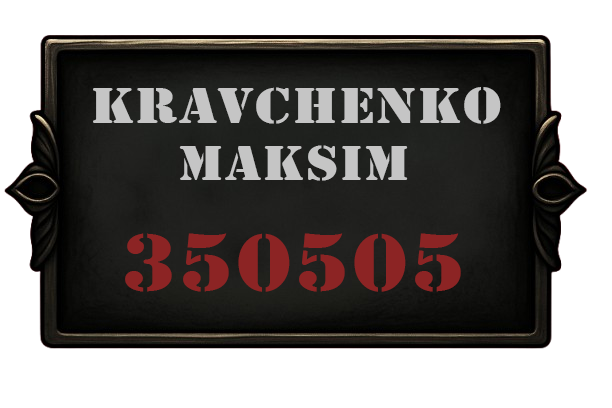
<style>
.page{position:relative;width:612px;height:408px;background:#ffffff}
.page>*{position:absolute;margin:0}
.t1{font:52.7px "Stencil";letter-spacing:0.02em;color:#c5c5c5;scale:1.15 1}
.t2{font:50.8px "Stencil";letter-spacing:0.02em;color:#c5c5c5;scale:1.15 1}
.t3{font:84.7px "Stencil";letter-spacing:0.02em;color:#8c2424;scale:1.15 1}
</style>
<div class="page">
<p class="t1" style="left:93px;top:87px;width:408px;height:37px">KRAVCHENKo</p>
<p class="t2" style="left:179px;top:145px;width:229px;height:36px">MAKSIM</p>
<p class="t3" style="left:125px;top:233px;width:336px;height:59px">350505</p>
</div>
